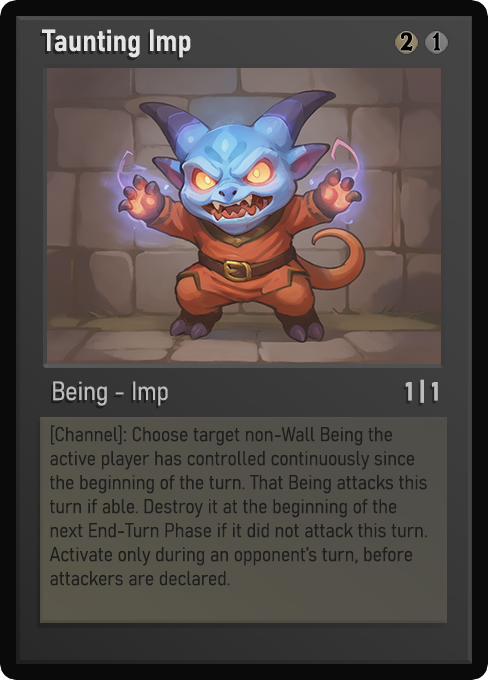
<style>
.page{position:relative;width:488px;height:680px}
.page>*{position:absolute;margin:0}
.t1{font:30px "Bahnschrift-SemiBoldSemiCondensed";color:#f2f2f2;font-weight:bold}
.t2{font:25px "WTRRoycroft";color:#000000;font-weight:bold;scale:1.09 1}
.t3{font:26px "Bahnschrift-LightSemiCondensed";color:#c8c8c8;font-weight:bold}
.t4{font:26px "Bahnschrift-BoldSemiCondensed";color:#bdbdbd;font-weight:bold}
.t5{font:20px "Bahnschrift-LightSemiCondensed";color:#1e1e1e;font-weight:bold}
</style>
<div class="page">
<p class="t1" style="left:42px;top:29px;width:149px;height:29px;opacity:0.9">Taunting Imp</p>
<p class="t2" style="left:400px;top:32px;width:13px;height:19px">2</p>
<p class="t2" style="left:432px;top:32px;width:9px;height:19px">1</p>
<p class="t3" style="left:53px;top:381px;width:115px;height:25px;opacity:0.9">Being - Imp</p>
<p class="t4" style="left:405px;top:379px;width:33px;height:24px">1 | 1</p>
<p class="t5" style="left:49px;top:425px;width:378px;height:161px">[Channel]: Choose target non-Wall Being the active player has controlled continuously since the beginning of the turn. That Being attacks this turn if able. Destroy it at the beginning of the next End-Turn Phase if it did not attack this turn. Activate only during an opponent’s turn, before attackers are declared.</p>
</div>
